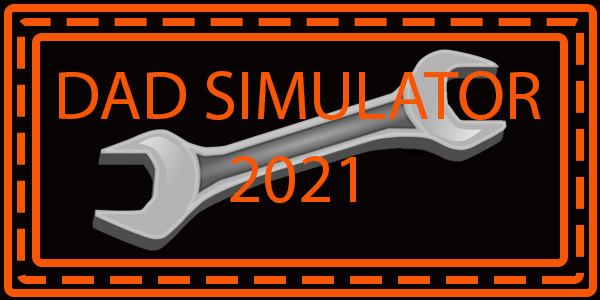
<style>
.page{position:relative;width:600px;height:300px;background:#070403}
.page>*{position:absolute;margin:0}
.t1{font:69.4px "MyriadPro-Regular";color:#f75605}
</style>
<div class="page">
<p class="t1" style="left:59px;top:71px;width:482px;height:132px;text-align:center">DAD SIMULATOR<br>2021</p>
</div>
